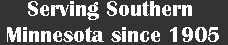
<style>
.page{position:relative;width:228px;height:45px;background:#333333}
.page>*{position:absolute;margin:0}
.t1{font:22px "BritannicBold";color:#ffffff}
</style>
<div class="page">
<p class="t1" style="left:7px;top:1px;width:212px;height:41px;text-align:center">Serving Southern Minnesota since 1905</p>
</div>
